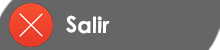
<style>
.page{position:relative;width:220px;height:50px;background:#666666}
.page>*{position:absolute;margin:0}
.t1{font:22px "CenturyGothic-Bold";color:#ffffff}
</style>
<div class="page">
<p class="t1" style="left:66px;top:15px;width:44px;height:19px">Salir</p>
</div>
